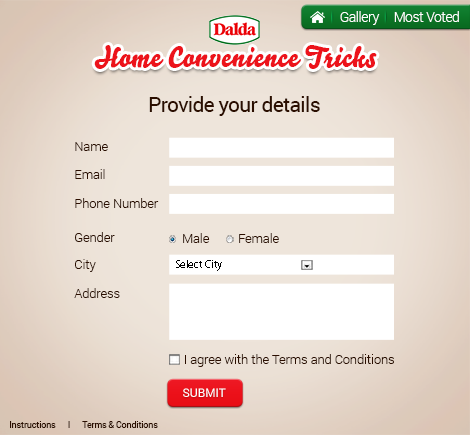
<style>
.page{position:relative;width:470px;height:435px}
.page>*{position:absolute;margin:0}
.t1{font:13.6px "Roboto-Light";letter-spacing:-0.025em;color:#ffffff}
.t2{font:27.8px "Bello-Script";letter-spacing:0.025em;color:#ec131b}
.t3{font:20.6px "Roboto-Regular";letter-spacing:-0.025em;color:#2b0e00}
.t4{font:12.7px/28.6px "Roboto-Light";color:#2b0e00}
.t5{font:12.7px/36.8px "Roboto-Light";color:#2b0e00}
.t6{font:12.7px/34px "Roboto-Light";color:#2b0e00}
.t7{font:12.7px/26.8px "Roboto-Light";color:#2b0e00}
.t8{font:12.7px/29.5px "Roboto-Light";color:#2b0e00}
.t9{font:12.7px "Roboto-Light";color:#2b0e00}
.t10{font:10.9px "MyriadPro-Regular";color:#000000}
.t11{font:11.9px "Roboto-Regular";color:#ffffff;text-transform:uppercase}
.t12{font:9.1px "Roboto-Regular";letter-spacing:-0.025em;color:#2b0e00}
</style>
<div class="page">
<p class="t1" style="left:340px;top:11px;width:119px;height:14px">Gallery     Most Voted</p>
<p class="t2" style="left:94px;top:45px;width:283px;height:24px">Home Convenience Tricks</p>
<p class="t3" style="left:149px;top:96px;width:171px;height:20px">Provide your details</p>
<p class="t4" style="left:74px;top:142px;width:85px;height:156px"><span class="t5">Name<br></span>Email<br>Phone Number<br><span class="t6">Gender<br></span><span class="t7">City<br></span><span class="t8">Address</span></p>
<p class="t9" style="left:183px;top:233px;width:27px;height:10px">Male</p>
<p class="t9" style="left:239px;top:233px;width:40px;height:10px">Female</p>
<p class="t10" style="left:176px;top:260px;width:46px;height:11px">Select City</p>
<p class="t9" style="left:185px;top:354px;width:209px;height:13px">I agree with the Terms and Conditions</p>
<p class="t11" style="left:183px;top:388px;width:43px;height:9px">submit</p>
<p class="t12" style="left:10px;top:421px;width:148px;height:7px">Instructions      I      Terms &amp; Conditions</p>
</div>
